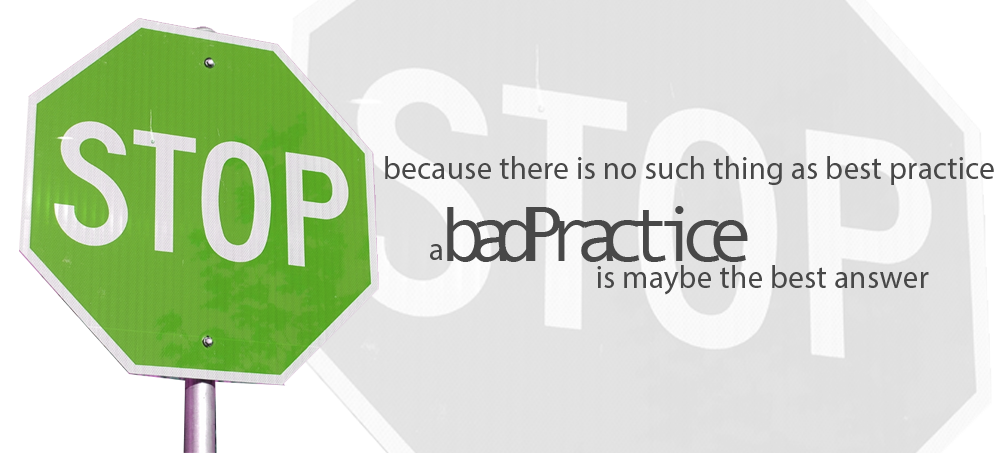
<style>
.page{position:relative;width:1000px;height:453px}
.page>*{position:absolute;margin:0}
.t1{font:31.7px "MyriadPro-Regular";color:#484848}
.t2{font:78.1px "AndaleMono";letter-spacing:-0.26em;color:#484848}
</style>
<div class="page">
<p class="t1" style="left:385px;top:156px;width:609px;height:29px">because there is no such thing as best practice</p>
<p class="t2" style="left:447px;top:206px;width:301px;height:56px">badPractice</p>
<p class="t1" style="left:430px;top:244px;width:12px;height:16px">a</p>
<p class="t1" style="left:597px;top:265px;width:332px;height:30px">is maybe the best answer</p>
</div>
